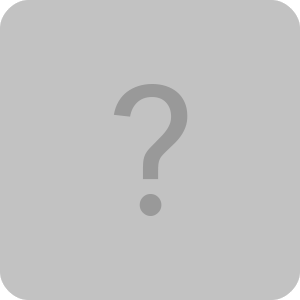
<style>
.page{position:relative;width:300px;height:300px;background:#c2c2c2}
.page>*{position:absolute;margin:0}
.t1{font:180px "Avenir-Roman";color:#999999}
</style>
<div class="page">
<p class="t1" style="left:113px;top:84px;width:75px;height:132px">?</p>
</div>
